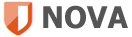
<style>
.page{position:relative;width:132px;height:37px;background:#ffffff}
.page>*{position:absolute;margin:0}
.t1{font:30px "Tahoma-Bold";color:#555555}
</style>
<div class="page">
<p class="t1" style="left:43px;top:5px;width:85px;height:24px">NOVA</p>
</div>
